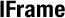
<style>
.page{position:relative;width:65px;height:18px;background:#ffffff}
.page>*{position:absolute;margin:0}
.t1{font:22.8px "HelveticaNeue-CondensedBold";letter-spacing:0.005em;color:#000000;scale:1.05 1}
</style>
<div class="page">
<p class="t1" style="left:0px;top:0px;width:65px;height:18px">IFrame</p>
</div>
